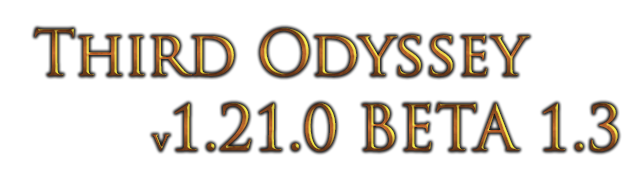
<style>
.page{position:relative;width:640px;height:180px;background:#ffffff}
.page>*{position:absolute;margin:0}
.t1{font:60.8px "TrajanPro-Regular"}
.t2{font:24px "TrajanPro-Regular"}
</style>
<div class="page">
<p class="t1" style="left:34px;top:28px;width:496px;height:49px">Third Odyssey</p>
<p class="t1" style="left:152px;top:103px;width:466px;height:49px"><span class="t2">v</span>1.21.0 BETA 1.3</p>
</div>
